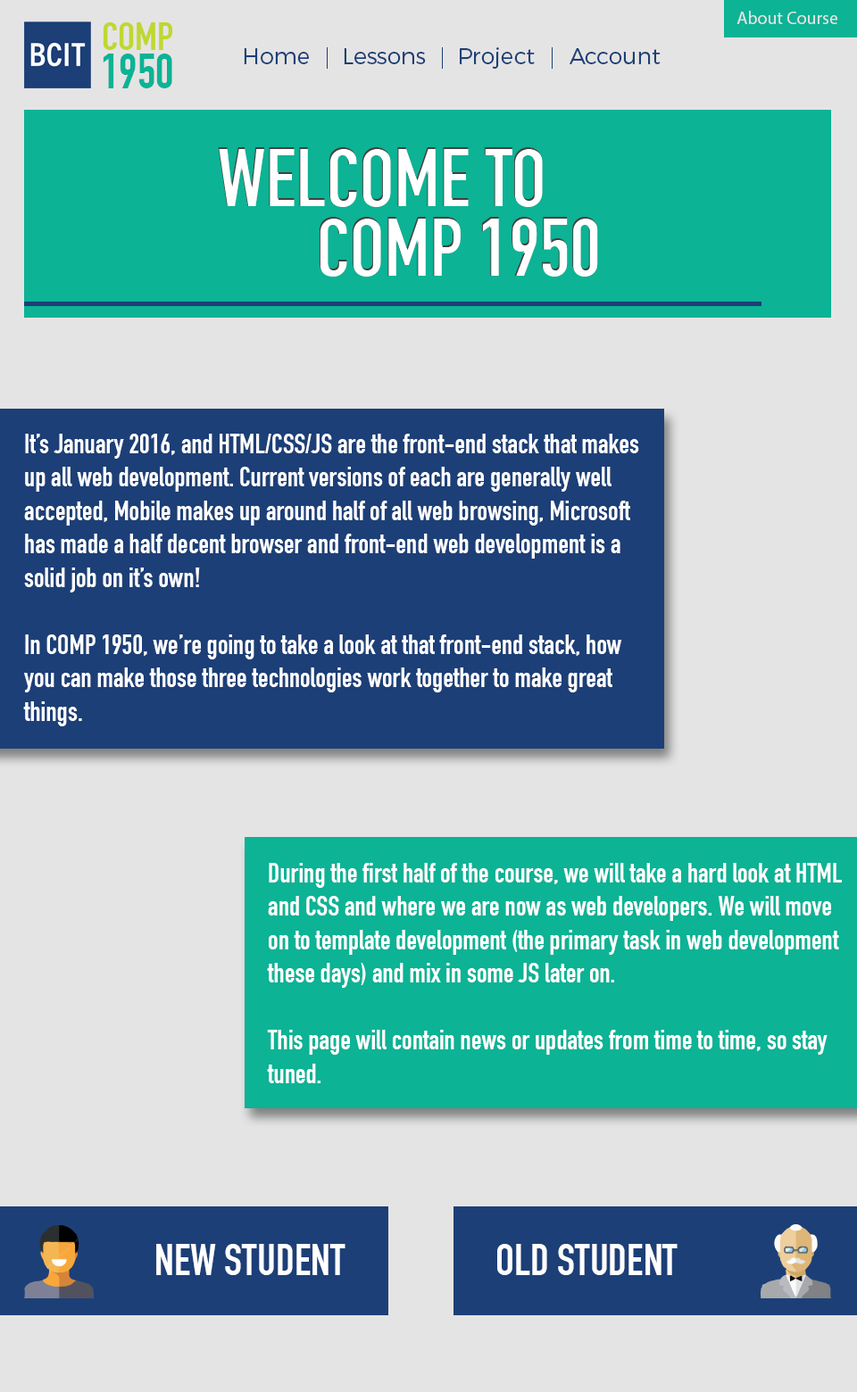
<style>
.page{position:relative;width:857px;height:1392px;background:#e5e4e4}
.page>*{position:absolute;margin:0}
.t1{font:18.1px "MyriadPro-Regular";color:#e5e4e4}
.t2{font:39.7px "DINCondensed-Bold";color:#c0d731}
.t3{font:49.2px "DINCondensed-Bold";color:#0cb395}
.t4{font:22.7px "Montserrat-Light";color:#1c3f77}
.t5{font:81.7px "DINCondensed-Bold";color:#ffffff}
.t6{font:27.9px "DINCondensed-Bold";color:#ffffff}
.t7{font:43.6px "DINCondensed-Bold";color:#ffffff}
</style>
<div class="page">
<p class="t1" style="left:736px;top:11px;width:101px;height:13px">About Course</p>
<p class="t2" style="left:103px;top:22px;width:69px;height:28px">COMP</p>
<p class="t3" style="left:103px;top:54px;width:69px;height:34px">1950</p>
<p class="t4" style="left:244px;top:48px;width:65px;height:16px">Home</p>
<p class="t4" style="left:344px;top:48px;width:82px;height:16px">Lessons</p>
<p class="t4" style="left:460px;top:47px;width:74px;height:22px">Project</p>
<p class="t4" style="left:569px;top:48px;width:91px;height:16px">Account</p>
<p class="t5" style="left:218px;top:147px;width:325px;height:60px">WELCOME TO</p>
<p class="t5" style="left:319px;top:217px;width:279px;height:60px">COMP 1950</p>
<p class="t6" style="left:23px;top:434px;width:616px;height:292px">It’s January 2016, and HTML/CSS/JS are the front-end stack that makes <br>up all web development. Current versions of each are generally well <br>accepted, Mobile makes up around half of all web browsing, Microsoft <br>has made a half decent browser and front-end web development is a <br>solid job on it’s own!<br><br>In COMP 1950, we’re going to take a look at that front-end stack, how <br>you can make those three technologies work together to make great <br>things.</p>
<p class="t6" style="left:267px;top:863px;width:574px;height:220px">During the first half of the course, we will take a hard look at HTML <br>and CSS and where we are now as web developers. We will move <br>on to template development (the primary task in web development <br>these days) and mix in some JS later on.<br><br>This page will contain news or updates from time to time, so stay <br>tuned.</p>
<p class="t7" style="left:156px;top:1244px;width:189px;height:31px">NEW STUDENT</p>
<p class="t7" style="left:497px;top:1244px;width:180px;height:31px">OLD STUDENT</p>
</div>
